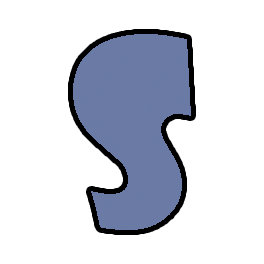
<style>
.page{position:relative;width:264px;height:264px;background:#ffffff}
.page>*{position:absolute;margin:0}
.t1{font:251px "ShowcardGothic-Reg";color:#627ea7}
</style>
<div class="page">
<p class="t1" style="left:73px;top:34px;width:118px;height:196px">S</p>
</div>
